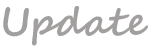
<style>
.page{position:relative;width:152px;height:51px;background:#ffffff}
.page>*{position:absolute;margin:0}
.t1{font:39.1px "SegoeScript-Bold";color:#a29f9f}
</style>
<div class="page">
<p class="t1" style="left:3px;top:6px;width:145px;height:40px">Update</p>
</div>
